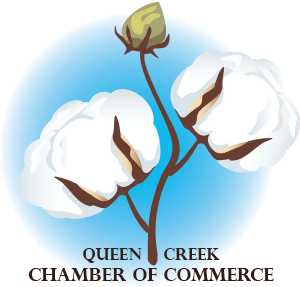
<style>
.page{position:relative;width:300px;height:287px;background:#ffffff}
.page>*{position:absolute;margin:0}
.t1{font:18px "PerpetuaTitlingMT-Bold";color:#321d15}
.t2{font:16px "PerpetuaTitlingMT-Bold";color:#321d15}
</style>
<div class="page">
<p class="t1" style="left:28px;top:248px;width:246px;height:33px;text-align:center"><span class="t2">Queen    Creek<br></span>Chamber of Commerce</p>
</div>
